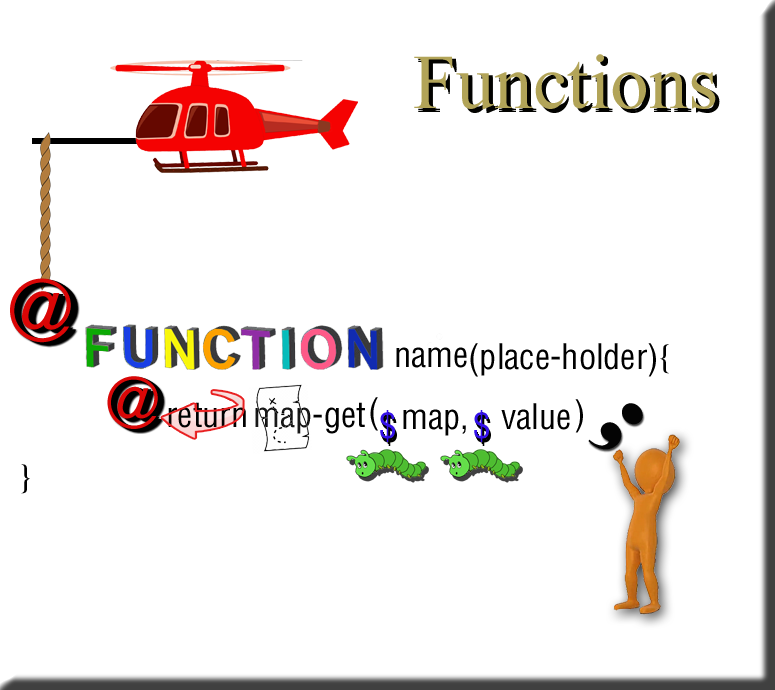
<style>
.page{position:relative;width:775px;height:690px;background:#ffffff}
.page>*{position:absolute;margin:0}
.t1{font:77.3px "TimesNewRomanPSMT";color:#b2a458}
.t2{font:77.3px "TimesNewRomanPSMT"}
.t3{font:83.3px "HelveticaLTStd-Cond";color:#da0707}
.t4{font:83.3px "HelveticaLTStd-Cond"}
.t5{font:83.3px "HelveticaLTStd-Cond";color:#000000}
.t6{font:34.3px "HelveticaLTStd-Cond";color:#000000}
.t7{font:69px "HelveticaLTStd-Cond";color:#da0707}
.t8{font:69px "HelveticaLTStd-Cond"}
.t9{font:69px "HelveticaLTStd-Cond";color:#000000}
.t10{font:34.3px "HelveticaLTStd-Cond";color:#3411ea}
.t11{font:34.3px "HelveticaLTStd-Cond"}
.t12{font:99.2px "Elephant-Regular";color:#040404;scale:1.13 1}
</style>
<div class="page">
<p class="t1" style="left:414px;top:54px;width:302px;height:55px">Functions</p>
<p class="t2" style="left:418px;top:58px;width:302px;height:55px">Functions</p>
<p class="t2" style="left:418px;top:56px;width:302px;height:55px">Functions</p>
<p class="t3" style="left:10px;top:278px;width:61px;height:65px">@</p>
<p class="t4" style="left:14px;top:279px;width:61px;height:65px">@</p>
<p class="t5" style="left:16px;top:281px;width:61px;height:65px">@</p>
<p class="t5" style="left:17px;top:281px;width:61px;height:65px">@</p>
<p class="t6" style="left:396px;top:347px;width:71px;height:21px">name</p>
<p class="t6" style="left:470px;top:343px;width:186px;height:34px">(place-holder)</p>
<p class="t6" style="left:660px;top:344px;width:9px;height:30px">{</p>
<p class="t7" style="left:107px;top:376px;width:51px;height:53px">@</p>
<p class="t8" style="left:110px;top:377px;width:51px;height:53px">@</p>
<p class="t9" style="left:112px;top:379px;width:51px;height:53px">@</p>
<p class="t9" style="left:113px;top:379px;width:51px;height:53px">@</p>
<p class="t6" style="left:370px;top:397px;width:8px;height:34px">(</p>
<p class="t6" style="left:575px;top:399px;width:8px;height:34px">)</p>
<p class="t6" style="left:168px;top:402px;width:78px;height:26px">return</p>
<p class="t6" style="left:255px;top:402px;width:110px;height:32px">map-get</p>
<p class="t10" style="left:380px;top:410px;width:15px;height:32px">$</p>
<p class="t11" style="left:381px;top:412px;width:15px;height:32px">$</p>
<p class="t11" style="left:382px;top:414px;width:15px;height:32px">$</p>
<p class="t6" style="left:403px;top:409px;width:63px;height:27px">map,</p>
<p class="t10" style="left:474px;top:410px;width:15px;height:32px">$</p>
<p class="t11" style="left:475px;top:412px;width:15px;height:32px">$</p>
<p class="t11" style="left:476px;top:414px;width:15px;height:32px">$</p>
<p class="t6" style="left:501px;top:403px;width:69px;height:27px">value</p>
<p class="t12" style="left:588px;top:403px;width:55px;height:47px;rotate:48deg">;</p>
<p class="t6" style="left:21px;top:464px;width:9px;height:30px">}</p>
</div>
